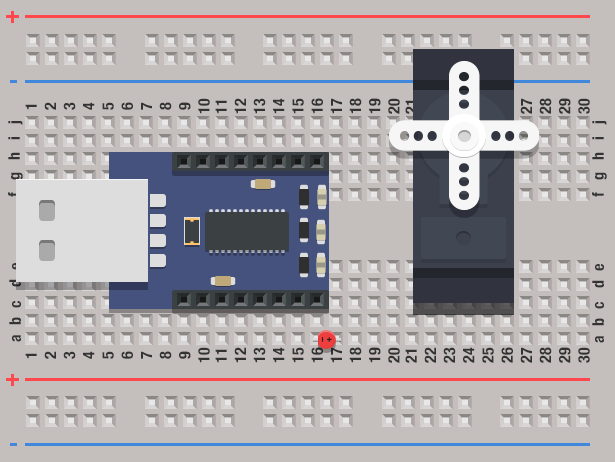
<style>
.page{position:relative;width:615px;height:462px;background:#c4bfbd}
.page>*{position:absolute;margin:0}
.t1{font:24px "HelveticaNeue-CondensedBold";color:#ff484c}
.t2{font:16px "HelveticaNeue-CondensedBold";color:#333333}
.t3{font:16px "HelveticaNeue-CondensedBold"}
.t4{font:16px "HelveticaNeue-CondensedBold";letter-spacing:0.25em;color:#333333}
.t5{font:16px "HelveticaNeue-CondensedBold";letter-spacing:0.02em;color:#333333}
</style>
<div class="page">
<p class="t1" style="left:6px;top:11px;width:13px;height:12px">+</p>
<p class="t2" style="left:25px;top:98px;width:185px;height:16px;text-align:center;rotate:-90deg">1<br>2<br>3<br>4<br>5<br>6<br>7<br>8<br>9<br>10</p>
<p class="t2" style="left:215px;top:98px;width:185px;height:16px;text-align:center;rotate:-90deg">11<br>12<br>13<br>14<br>15<br>16<br>17<br>18<br>19<br>20</p>
<p class="t3" style="left:405px;top:98px;width:185px;height:16px;text-align:center;rotate:-90deg">21<br>22<br>23<br>24<br>25<br>26<br>27<br>28<br>29<br>30</p>
<p class="t4" style="left:8px;top:121px;width:15px;height:76px;rotate:-90deg">f g h i j</p>
<p class="t4" style="left:592px;top:121px;width:15px;height:76px;rotate:-90deg">f g h i j</p>
<p class="t5" style="left:9px;top:263px;width:12px;height:79px;rotate:-90deg">a  b  c   d  e</p>
<p class="t5" style="left:592px;top:264px;width:12px;height:79px;rotate:-90deg">a  b  c   d  e</p>
<p class="t2" style="left:25px;top:347px;width:185px;height:16px;text-align:center;rotate:-90deg">1<br>2<br>3<br>4<br>5<br>6<br>7<br>8<br>9<br>10</p>
<p class="t2" style="left:215px;top:347px;width:185px;height:16px;text-align:center;rotate:-90deg">11<br>12<br>13<br>14<br>15<br>16<br>17<br>18<br>19<br>20</p>
<p class="t2" style="left:405px;top:347px;width:185px;height:16px;text-align:center;rotate:-90deg">21<br>22<br>23<br>24<br>25<br>26<br>27<br>28<br>29<br>30</p>
<p class="t1" style="left:6px;top:374px;width:13px;height:12px">+</p>
</div>
